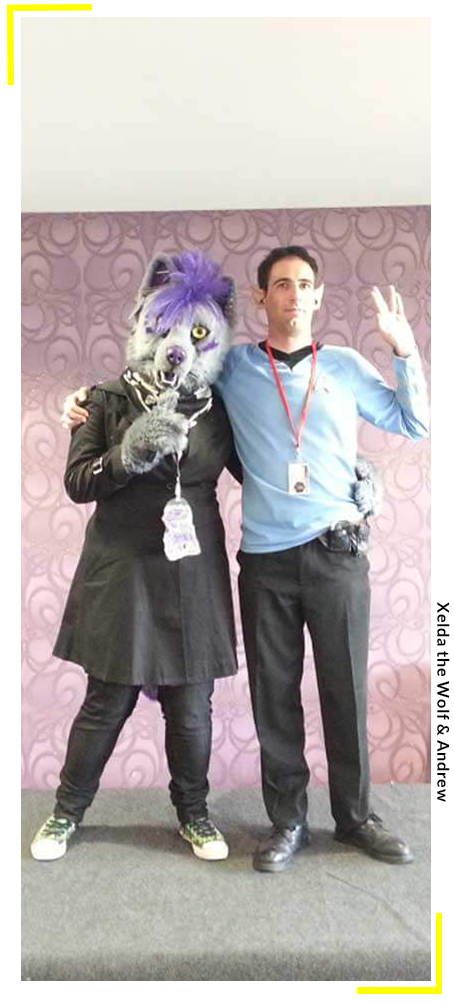
<style>
.page{position:relative;width:454px;height:1002px}
.page>*{position:absolute;margin:0}
.t1{font:28px "Lato-Bold";letter-spacing:0.04em;color:#000000}
</style>
<div class="page">
<p class="t1" style="left:437px;top:602px;width:13px;height:200px;rotate:90deg">Xelda the Wolf &amp; Andrew</p>
</div>
